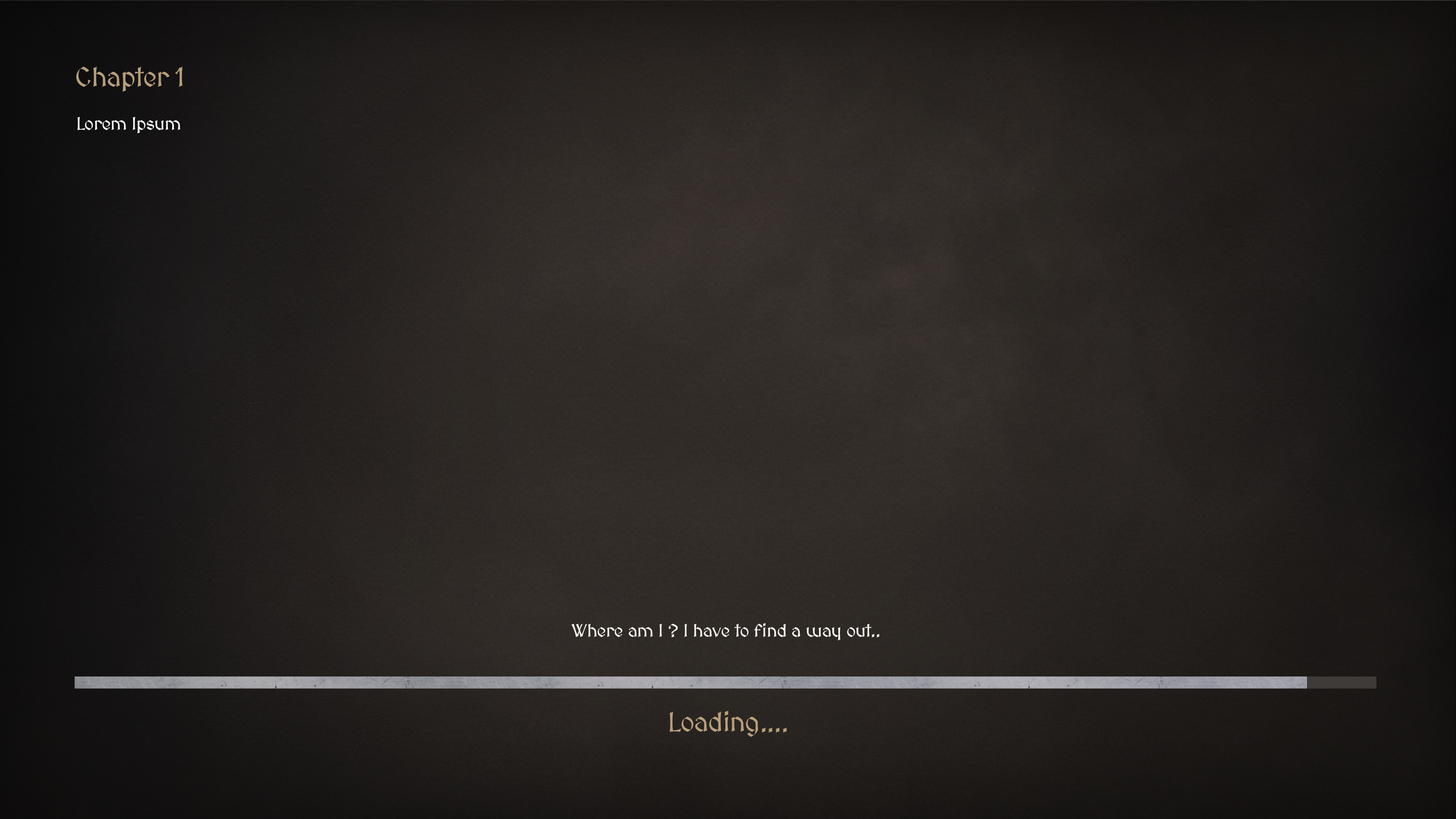
<style>
.page{position:relative;width:1456px;height:819px}
.page>*{position:absolute;margin:0}
.t1{font:27.3px "MedievalSharp";letter-spacing:-0.02em;color:#b79f7b}
.t2{font:18.2px "MedievalSharp";letter-spacing:-0.02em;color:#ffffff}
.t3{font:18.2px "MedievalSharp";letter-spacing:-0.02em;color:#fffbf5}
</style>
<div class="page">
<p class="t1" style="left:76px;top:67px;width:107px;height:25px">Chapter 1</p>
<p class="t2" style="left:77px;top:117px;width:103px;height:16px">Lorem Ipsum</p>
<p class="t3" style="left:571px;top:623px;width:308px;height:17px">Where am I ? I have to find a way out..</p>
<p class="t1" style="left:670px;top:711px;width:117px;height:26px">Loading....</p>
</div>
